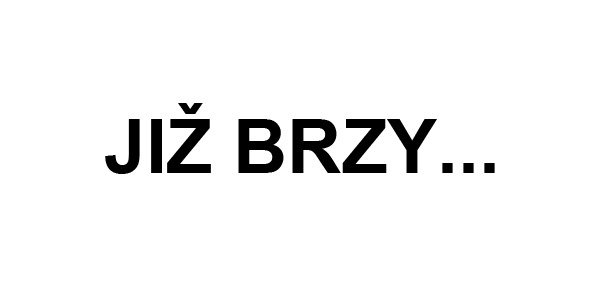
<style>
.page{position:relative;width:600px;height:300px;background:#ffffff}
.page>*{position:absolute;margin:0}
.t1{font:75px "Arial-BoldMT";color:#000000}
</style>
<div class="page">
<p class="t1" style="left:105px;top:103px;width:390px;height:71px">JIŽ BRZY...</p>
</div>
